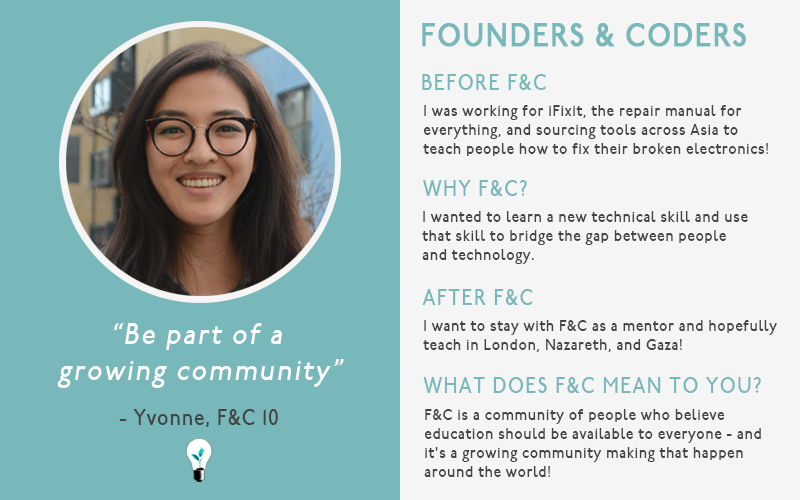
<style>
.page{position:relative;width:800px;height:500px;background:#f5f5f5}
.page>*{position:absolute;margin:0}
.t1{font:32px "P22UndergroundMedium";letter-spacing:0.05em;color:#78b7ba;font-weight:bold;scale:0.86 1}
.t2{font:22px "P22UndergroundMedium";letter-spacing:0.075em;color:#78b7ba;scale:0.86 1}
.t3{font:16px "P22UndergroundMedium";letter-spacing:0.05em;color:#444444;scale:0.86 1}
.t4{font:30px "P22UndergroundMedium";letter-spacing:0.075em;color:#ffffff;font-style:italic;scale:0.86 1}
.t5{font:22px "P22UndergroundMedium";letter-spacing:0.05em;color:#444444;scale:0.86 1}
</style>
<div class="page">
<p class="t1" style="left:422px;top:23px;width:324px;height:24px">FOUNDERS &amp; CODERS</p>
<p class="t2" style="left:422px;top:74px;width:124px;height:16px">BEFORE F&amp;C</p>
<p class="t3" style="left:423px;top:105px;width:345px;height:51px">I was working for iFixit, the repair manual for <br>everything, and sourcing tools across Asia to <br>teach people how to fix their broken electronics!</p>
<p class="t2" style="left:423px;top:180px;width:104px;height:16px">WHY F&amp;C?</p>
<p class="t3" style="left:422px;top:211px;width:326px;height:53px">I wanted to learn a new technical skill and use <br>that skill to bridge the gap between people <br>and technology.</p>
<p class="t2" style="left:422px;top:289px;width:111px;height:16px">AFTER F&amp;C</p>
<p class="t4" style="left:57px;top:323px;width:287px;height:65px;text-align:center">“Be part of a <br>growing community”</p>
<p class="t3" style="left:423px;top:320px;width:354px;height:32px">I want to stay with F&amp;C as a mentor and hopefully <br>teach in London, Nazareth, and Gaza!</p>
<p class="t2" style="left:423px;top:377px;width:338px;height:16px">WHAT DOES F&amp;C MEAN TO YOU?</p>
<p class="t5" style="left:119px;top:409px;width:159px;height:18px">- Yvonne, F&amp;C 10</p>
<p class="t3" style="left:424px;top:409px;width:337px;height:68px">F&amp;C is a community of people who believe <br>education should be available to everyone - and <br>it's a growing community making that happen <br>around the world!</p>
</div>
